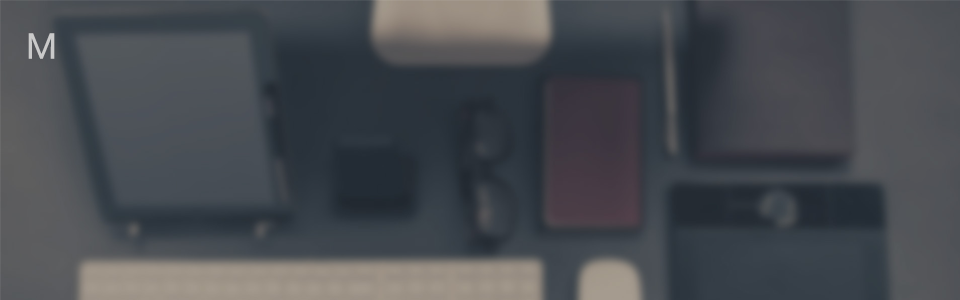
<style>
.page{position:relative;width:960px;height:300px}
.page>*{position:absolute;margin:0}
.t1{font:36px "Roboto-Regular";color:#cacaca}
</style>
<div class="page">
<p class="t1" style="left:28px;top:33px;width:27px;height:26px">M</p>
</div>
